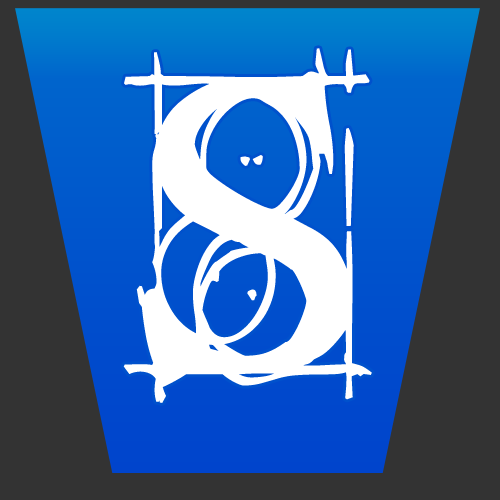
<style>
.page{position:relative;width:500px;height:500px;background:#333333}
.page>*{position:absolute;margin:0}
.t1{font:350px "OldConstructedCaps";letter-spacing:-0.05em;color:#ffffff;font-weight:bold}
</style>
<div class="page">
<p class="t1" style="left:123px;top:48px;width:249px;height:355px">S</p>
</div>
